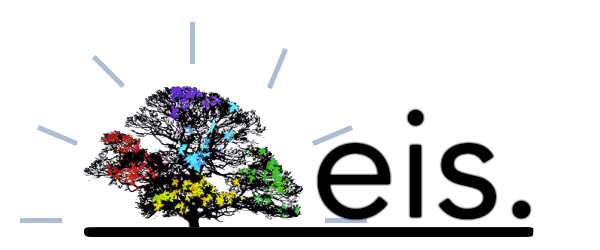
<style>
.page{position:relative;width:600px;height:250px;background:#ffffff}
.page>*{position:absolute;margin:0}
.t1{font:153px "AvenirLTStd-Book";color:#000000}
</style>
<div class="page">
<p class="t1" style="left:318px;top:110px;width:212px;height:109px">eis.</p>
</div>
